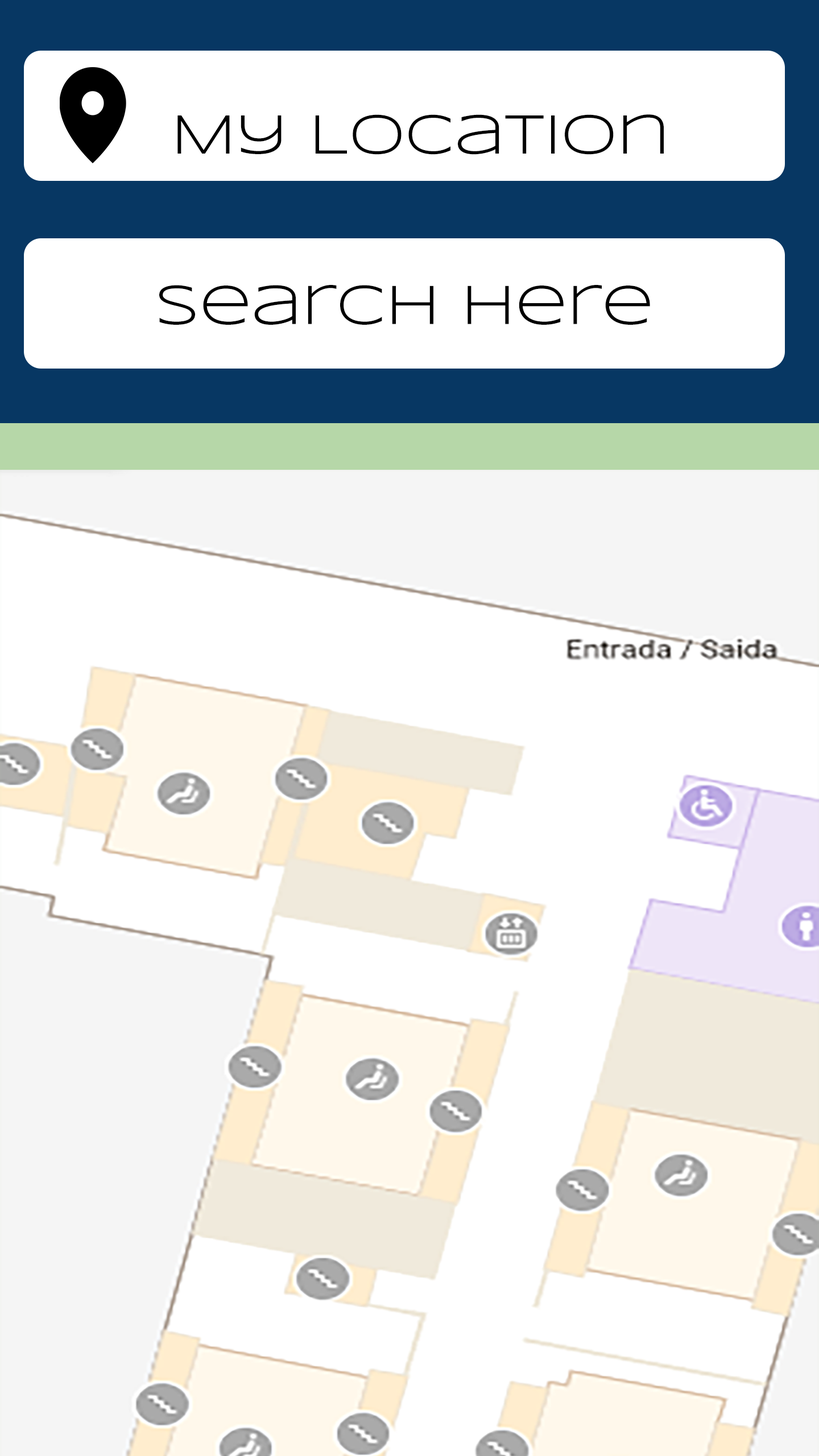
<style>
.page{position:relative;width:819px;height:1456px;background:#ffffff}
.page>*{position:absolute;margin:0}
.t1{font:56.9px "Syncopate-Regular";color:#000000}
</style>
<div class="page">
<p class="t1" style="left:177px;top:114px;width:487px;height:41px">My Location</p>
<p class="t1" style="left:159px;top:285px;width:491px;height:40px">Search here</p>
</div>
